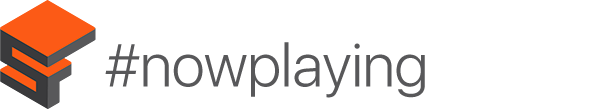
<style>
.page{position:relative;width:600px;height:109px;background:#ffffff}
.page>*{position:absolute;margin:0}
.t1{font:60px "SFUIDisplay-Light";color:#58585a}
</style>
<div class="page">
<p class="t1" style="left:105px;top:42px;width:320px;height:56px">#nowplaying</p>
</div>
